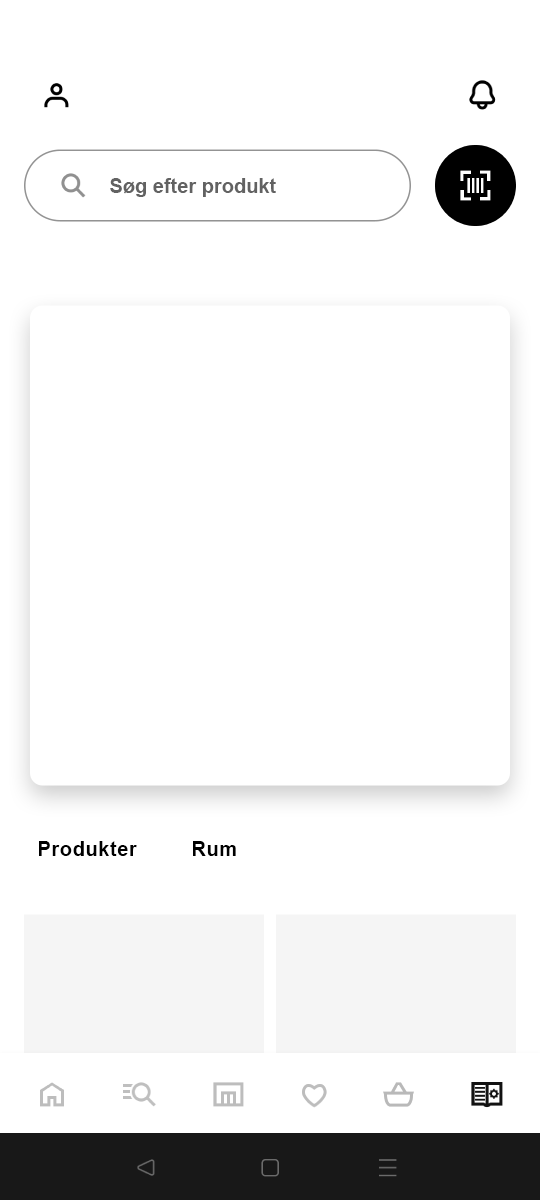
<style>
.page{position:relative;width:540px;height:1200px;background:#ffffff}
.page>*{position:absolute;margin:0}
.t1{font:20px "Arial-BoldMT";color:#626262}
.t2{font:20px "Arial-BoldMT";letter-spacing:0.03em;color:#000000}
</style>
<div class="page">
<p class="t1" style="left:110px;top:178px;width:166px;height:19px">Søg efter produkt</p>
<p class="t2" style="left:39px;top:841px;width:98px;height:15px">Produkter</p>
<p class="t2" style="left:193px;top:841px;width:43px;height:15px">Rum</p>
</div>
